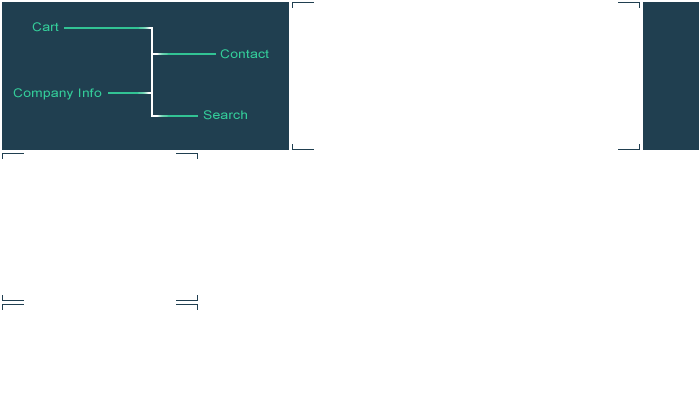
<style>
.page{position:relative;width:700px;height:400px;background:#ffffff}
.page>*{position:absolute;margin:0}
.t1{font:12px "ArialMT";letter-spacing:0.02em;color:#33cc99;scale:1.15 1}
</style>
<div class="page">
<p class="t1" style="left:32px;top:22px;width:27px;height:10px">Cart</p>
<p class="t1" style="left:220px;top:49px;width:49px;height:10px">Contact</p>
<p class="t1" style="left:220px;top:49px;width:49px;height:10px">Contact</p>
<p class="t1" style="left:13px;top:88px;width:89px;height:12px">Company Info</p>
<p class="t1" style="left:203px;top:110px;width:44px;height:10px">Search</p>
</div>
